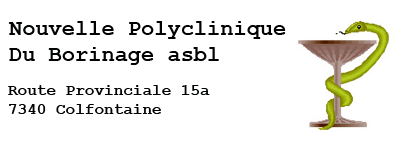
<style>
.page{position:relative;width:401px;height:146px;background:#ffffff}
.page>*{position:absolute;margin:0}
.t1{font:22px "CourierNewPS-BoldMT";color:#000101}
.t2{font:16px "CourierNewPS-BoldMT";color:#000101}
</style>
<div class="page">
<p class="t1" style="left:8px;top:21px;width:278px;height:44px">Nouvelle Polyclinique<br>Du Borinage asbl</p>
<p class="t2" style="left:8px;top:85px;width:202px;height:29px">Route Provinciale 15a<br>7340 Colfontaine</p>
</div>
